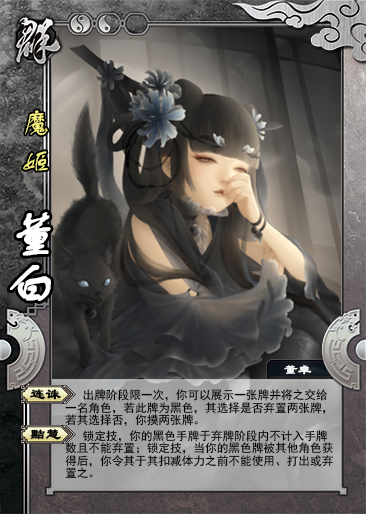
<style>
.page{position:relative;width:366px;height:514px}
.page>*{position:absolute;margin:0}
.t1{font:29.2px "FZSTK--GBK1-0";letter-spacing:0.32em;color:#f6f17d}
.t2{font:50px "FZSTK--GBK1-0";color:#ffffff;font-weight:bold}
.t3{font:13.8px "LiSu";color:#ffffff}
.t4{font:15px "LiSu";color:#000000;font-weight:bold}
.t5{font:11.7px/12.5px "SimHei";color:#000000}
.t6{font:11.7px/15.8px "SimHei";color:#000000}
</style>
<div class="page">
<p class="t1" style="left:23px;top:110px;width:25px;height:61px">魔姬</p>
<p class="t2" style="left:10px;top:212px;width:41px;height:89px">董白</p>
<p class="t3" style="left:284px;top:365px;width:28px;height:10px">董卓</p>
<p class="t4" style="left:30px;top:389px;width:31px;height:11px">连诛</p>
<p class="t5" style="left:65px;top:389px;width:268px;height:89px">出牌阶段限一次，你可以展示一张牌并将之交给一名角色，若此牌为黑色，其选择是否弃置两张牌，<span class="t6">若其选择否，你摸两张牌。<br></span>   锁定技，你的黑色手牌于弃牌阶段内不计入手牌数且不能弃置；锁定技，当你的黑色牌被其他角色获得后，你令其于其扣减体力之前不能使用、打出或弃置之。</p>
<p class="t4" style="left:30px;top:429px;width:31px;height:11px">黠慧</p>
</div>
